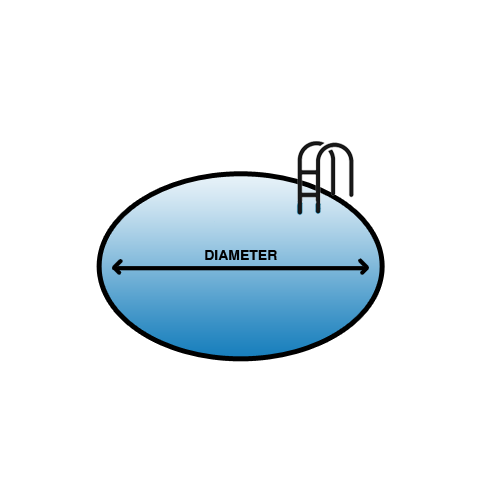
<style>
.page{position:relative;width:500px;height:500px;background:#ffffff}
.page>*{position:absolute;margin:0}
.t1{font:14px "Helvetica-Bold";color:#000000}
</style>
<div class="page">
<p class="t1" style="left:205px;top:250px;width:72px;height:10px">DIAMETER</p>
</div>
